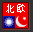
<style>
.page{position:relative;width:33px;height:32px;background:#333333}
.page>*{position:absolute;margin:0}
.t1{font:10.4px "SimSun";color:#ffffff}
</style>
<div class="page">
<p class="t1" style="left:6px;top:4px;width:19px;height:9px">北欧</p>
</div>
